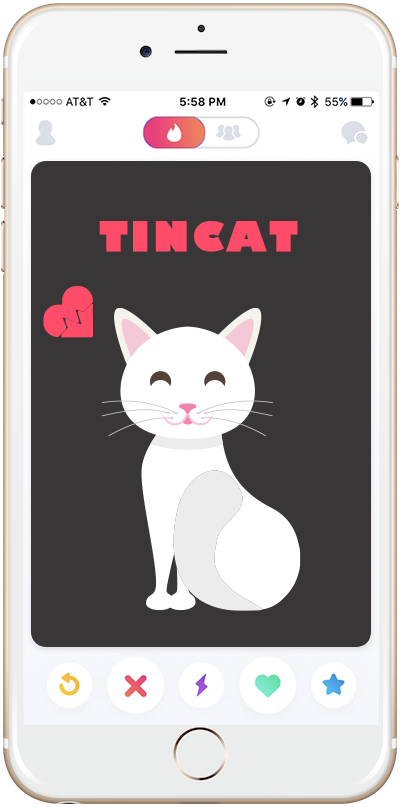
<style>
.page{position:relative;width:400px;height:807px;background:#393637}
.page>*{position:absolute;margin:0}
.t1{font:40.4px "GillSans-UltraBold";letter-spacing:0.05em;color:#ff4c68;text-transform:uppercase;font-weight:bold}
</style>
<div class="page">
<p class="t1" style="left:99px;top:221px;width:199px;height:31px">TinCat</p>
</div>
